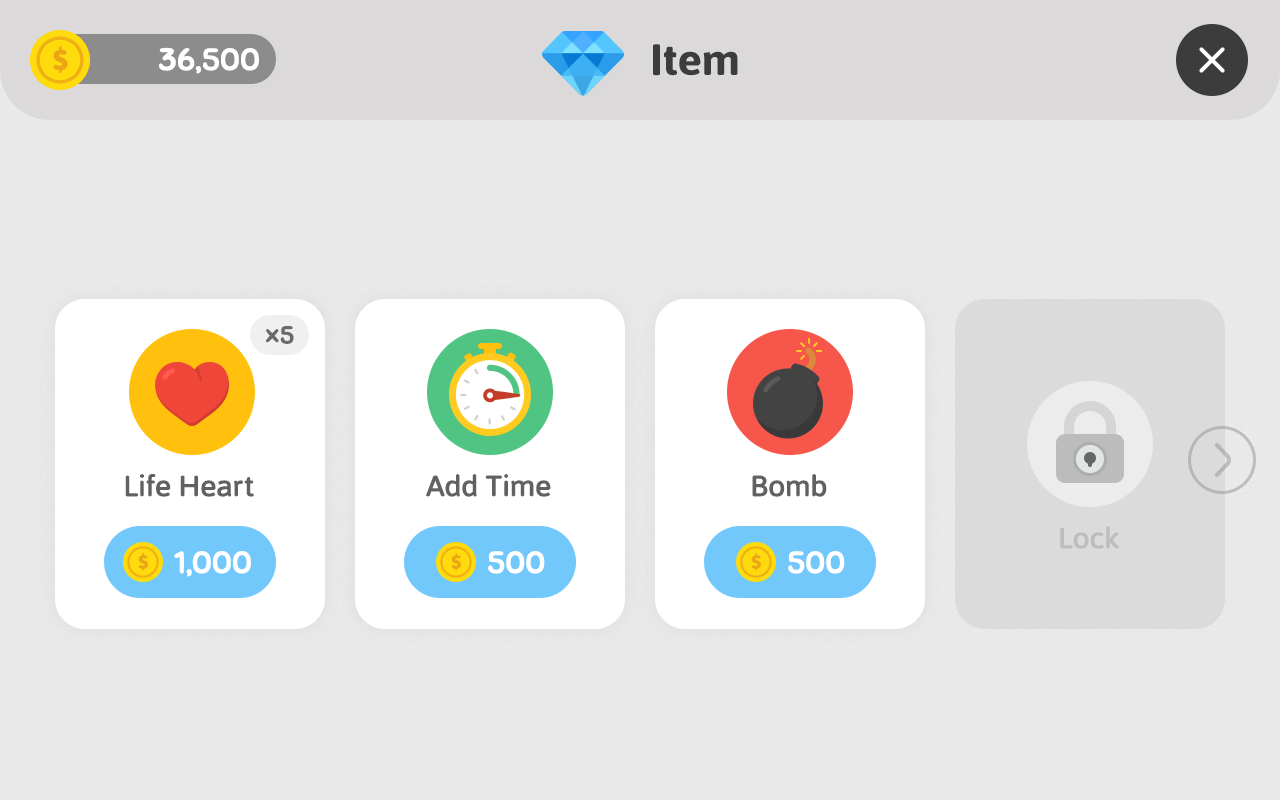
<style>
.page{position:relative;width:1280px;height:800px}
.page>*{position:absolute;margin:0}
.t1{font:30.4px "Sniglet-Regular";letter-spacing:-0.01em;color:#ffffff;font-weight:bold;scale:1.05 1}
.t2{font:43.7px "Asap-Bold";letter-spacing:-0.01em;color:#3c3c3c;scale:1.05 1}
.t3{font:24.3px "Sniglet-Regular";letter-spacing:0.04em;color:#6a6a6a;font-weight:bold;scale:1.05 1}
.t4{font:28.5px "Asap-Regular";letter-spacing:-0.025em;color:#616161;font-weight:bold;scale:1.05 1}
.t5{font:28.5px "Asap-Regular";letter-spacing:-0.025em;color:#bcbcbc;font-weight:bold;scale:1.05 1}
</style>
<div class="page">
<p class="t1" style="left:159px;top:47px;width:100px;height:27px">36,500</p>
<p class="t2" style="left:653px;top:44px;width:85px;height:32px">Item</p>
<p class="t3" style="left:265px;top:326px;width:29px;height:18px">x5</p>
<p class="t4" style="left:125px;top:474px;width:129px;height:23px">Life Heart</p>
<p class="t4" style="left:426px;top:474px;width:125px;height:23px">Add Time</p>
<p class="t4" style="left:752px;top:474px;width:75px;height:23px">Bomb</p>
<p class="t5" style="left:1060px;top:526px;width:59px;height:23px">Lock</p>
<p class="t1" style="left:174px;top:551px;width:77px;height:26px">1,000</p>
<p class="t1" style="left:488px;top:551px;width:57px;height:23px">500</p>
<p class="t1" style="left:788px;top:551px;width:57px;height:23px">500</p>
</div>
